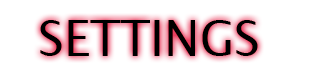
<style>
.page{position:relative;width:320px;height:80px;background:#ffffff}
.page>*{position:absolute;margin:0}
.t1{font:48px "LucidaGrande";color:#000000}
</style>
<div class="page">
<p class="t1" style="left:40px;top:20px;width:218px;height:36px">SETTINGS</p>
</div>
